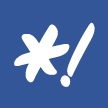
<style>
.page{position:relative;width:108px;height:108px;background:#335698}
.page>*{position:absolute;margin:0}
.t1{font:178.5px "SignPainter-HouseScriptSemibold";letter-spacing:-0.025em;color:#ffffff}
.t2{font:98.4px "SignPainter-HouseScriptSemibold";letter-spacing:-0.025em;color:#ffffff}
</style>
<div class="page">
<p class="t1" style="left:14px;top:24px;width:56px;height:59px">*</p>
<p class="t2" style="left:60px;top:22px;width:35px;height:65px">!</p>
</div>
